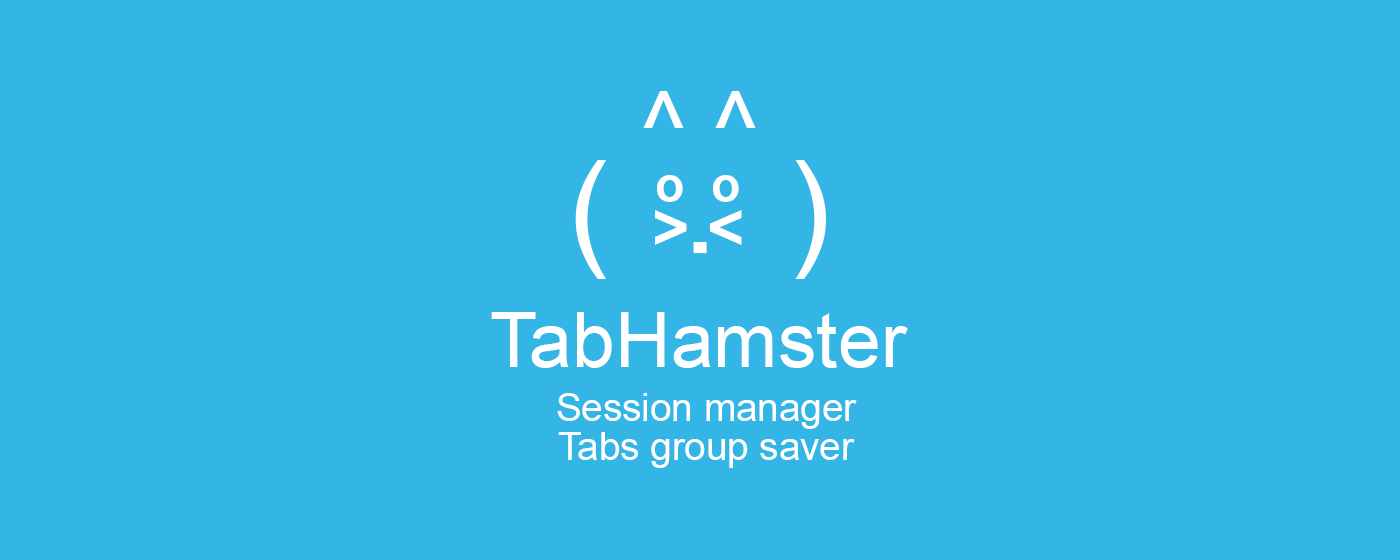
<style>
.page{position:relative;width:1400px;height:560px;background:#33b5e5}
.page>*{position:absolute;margin:0}
.t1{font:96.7px "ArialMT";color:#ffffff}
.t2{font:128.9px "ArialMT";color:#ffffff}
.t3{font:48.3px "Arial-BoldMT";color:#ffffff}
.t4{font:64.5px "Arial-BoldMT";color:#ffffff}
.t5{font:77.1px "ArialMT";color:#ffffff}
.t6{font:38.6px/38.6px "ArialMT";color:#ffffff}
</style>
<div class="page">
<p class="t1" style="left:643px;top:91px;width:113px;height:37px">^ ^</p>
<p class="t2" style="left:575px;top:160px;width:251px;height:119px">(  .  )</p>
<p class="t3" style="left:657px;top:175px;width:82px;height:27px">o  o</p>
<p class="t4" style="left:655px;top:210px;width:87px;height:35px">&gt; &lt;</p>
<p class="t5" style="left:491px;top:312px;width:417px;height:56px">TabHamster</p>
<p class="t6" style="left:557px;top:393px;width:300px;height:75px;text-align:center">Session manager<br>Tabs group saver</p>
</div>
